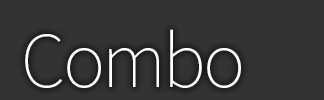
<style>
.page{position:relative;width:324px;height:100px;background:#333333}
.page>*{position:absolute;margin:0}
.t1{font:72px "NotoSansCJKkr-Thin";letter-spacing:-0.04em;color:#ffffff}
</style>
<div class="page">
<p class="t1" style="left:25px;top:29px;width:216px;height:59px">Combo</p>
</div>
